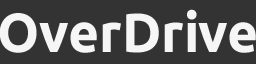
<style>
.page{position:relative;width:256px;height:64px;background:#333333}
.page>*{position:absolute;margin:0}
.t1{font:55px "Ubuntu-Bold";color:#f6f6f6}
</style>
<div class="page">
<p class="t1" style="left:0px;top:9px;width:256px;height:44px">OverDrive</p>
</div>
